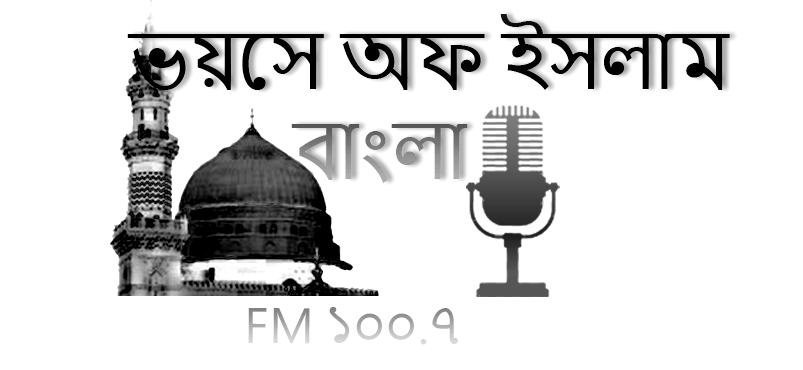
<style>
.page{position:relative;width:803px;height:370px;background:#ffffff}
.page>*{position:absolute;margin:0}
.t1{font:75px "NirmalaUI";color:#fd1c27}
.t2{font:75px "NirmalaUI";color:#000000}
.t3{font:50px "NirmalaUI"}
</style>
<div class="page">
<p class="t1" style="left:127px;top:14px;width:603px;height:169px">ভয়েস অফ ইসলাম <br><span class="t2">        বাংলা</span></p>
<p class="t3" style="left:248px;top:306px;width:210px;height:39px">FM ১০০.৭</p>
</div>
